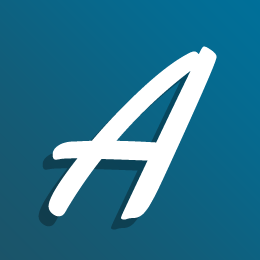
<style>
.page{position:relative;width:260px;height:260px}
.page>*{position:absolute;margin:0}
.t1{font:230px "Yellowtail";color:#ffffff}
</style>
<div class="page">
<p class="t1" style="left:48px;top:46px;width:169px;height:174px">A</p>
</div>
